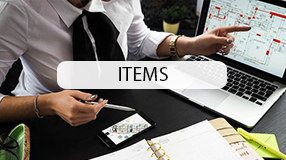
<style>
.page{position:relative;width:286px;height:160px}
.page>*{position:absolute;margin:0}
.t1{font:20px "MyriadPro-Regular";color:#000000}
</style>
<div class="page">
<p class="t1" style="left:119px;top:67px;width:49px;height:14px">ITEMS</p>
</div>
